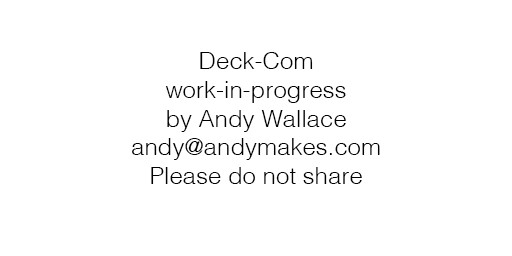
<style>
.page{position:relative;width:512px;height:256px;background:#ffffff}
.page>*{position:absolute;margin:0}
.t1{font:24px "Helvetica-Light";color:#000000}
</style>
<div class="page">
<p class="t1" style="left:132px;top:52px;width:248px;height:132px;text-align:center">Deck-Com<br>work-in-progress<br>by Andy Wallace<br>andy@andymakes.com<br>Please do not share</p>
</div>
